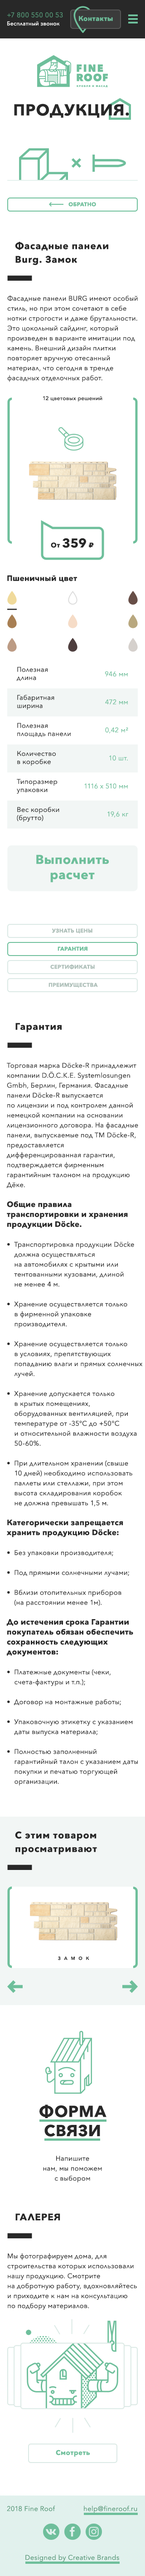
<style>
.page{position:relative;width:145px;height:2576px;background:#ffffff}
.page>*{position:absolute;margin:0}
.t1{font:6.8px "AvenirNext-Regular";letter-spacing:0.025em;color:#559777}
.t2{font:6.8px "AvenirNext-Bold";letter-spacing:0.025em;color:#6ebf9b}
.t3{font:5.4px "AvenirNext-Medium";letter-spacing:0.025em;color:#ffffff}
.t4{font:15.8px "AvenirNext-Bold";letter-spacing:0.05em;color:#282828;text-transform:uppercase}
.t5{font:5.4px "AvenirNext-Bold";letter-spacing:0.025em;color:#6ebf9b;text-transform:uppercase}
.t6{font:9.5px/13.6px "AvenirNext-Bold";letter-spacing:0.05em;color:#272727}
.t7{font:6.8px/9.9px "AvenirNext-Regular";letter-spacing:0.025em;color:#272727}
.t8{font:5.4px "AvenirNext-Medium";letter-spacing:0.025em;color:#272727}
.t9{font:12.7px "AvenirNext-Bold";letter-spacing:0.025em;color:#272727}
.t10{font:6.8px "AvenirNext-Bold";letter-spacing:0.025em;color:#272727}
.t11{font:6.8px "Geometria-ExtraBold";letter-spacing:0.025em;color:#272727}
.t12{font:7.7px "AvenirNext-Bold";letter-spacing:0.025em;color:#282828}
.t13{font:6.8px "AvenirNext-Regular";letter-spacing:0.025em;color:#272727}
.t14{font:6.8px "AvenirNext-Regular";letter-spacing:0.025em;color:#6ebf9b}
.t15{font:12.7px "AvenirNext-Bold";letter-spacing:0.025em;color:#6ebf9b}
.t16{font:5.4px "AvenirNext-Bold";letter-spacing:0.025em;color:#aebfb9;text-transform:uppercase}
.t17{font:9.5px "AvenirNext-Bold";letter-spacing:0.05em;color:#272727}
.t18{font:6.8px/9.9px "AvenirNext-Regular";letter-spacing:0.025em;color:#282828}
.t19{font:7.7px/9.9px "AvenirNext-Bold";letter-spacing:0.025em;color:#282828}
.t20{font:4.5px "AvenirNext-DemiBold";letter-spacing:0.765em;color:#272727}
.t21{font:15.8px/19.2px "AvenirNext-Bold";letter-spacing:0.05em;color:#282828;text-transform:uppercase}
.t22{font:9.5px "AvenirNext-Bold";letter-spacing:0.05em;color:#272727;text-transform:uppercase}
</style>
<div class="page">
<p class="t1" style="left:7px;top:12px;width:56px;height:6px">+7 800 550 00 53</p>
<p class="t2" style="left:79px;top:16px;width:34px;height:5px">Контакты</p>
<p class="t3" style="left:7px;top:21px;width:53px;height:5px">Бесплатный звонок</p>
<p class="t4" style="left:14px;top:104px;width:115px;height:14px">продукция.</p>
<p class="t5" style="left:68px;top:202px;width:28px;height:5px">обратно</p>
<p class="t6" style="left:15px;top:242px;width:93px;height:23px">Фасадные панели <br>Burg. Замок</p>
<p class="t7" style="left:7px;top:295px;width:130px;height:87px">Фасадные панели BURG имеют особый <br>стиль, но при этом сочетают в себе <br>нотки строгости и даже брутальности. <br>Это цокольный сайдинг, который <br>произведен в варианте имитации под <br>камень. Внешний дизайн плитки <br>повторяет вручную отесанный <br>материал, что сегодня в тренде <br>фасадных отделочных работ.</p>
<p class="t8" style="left:42px;top:396px;width:60px;height:6px">12 цветовых решений</p>
<p class="t9" style="left:51px;top:538px;width:43px;height:10px"><span class="t10">От </span>359 <span class="t11">₽</span></p>
<p class="t12" style="left:7px;top:575px;width:70px;height:7px">Пшеничный цвет</p>
<p class="t13" style="left:17px;top:667px;width:30px;height:14px">Полезная <br>длина</p>
<p class="t14" style="left:105px;top:671px;width:22px;height:6px">946 мм</p>
<p class="t13" style="left:17px;top:695px;width:37px;height:15px">Габаритная <br>ширина</p>
<p class="t14" style="left:105px;top:699px;width:22px;height:6px">472 мм</p>
<p class="t13" style="left:17px;top:723px;width:54px;height:14px">Полезная <br>площадь панели</p>
<p class="t14" style="left:105px;top:727px;width:23px;height:7px">0,42 м²</p>
<p class="t13" style="left:17px;top:751px;width:39px;height:15px">Количество <br>в коробке</p>
<p class="t14" style="left:109px;top:755px;width:18px;height:6px">10 шт.</p>
<p class="t13" style="left:17px;top:779px;width:40px;height:15px">Типоразмер <br>упаковки</p>
<p class="t14" style="left:84px;top:783px;width:43px;height:6px">1116 x 510 мм</p>
<p class="t13" style="left:17px;top:807px;width:42px;height:15px">Вес коробки <br>(брутто)</p>
<p class="t14" style="left:107px;top:811px;width:21px;height:7px">19,6 кг</p>
<p class="t15" style="left:36px;top:855px;width:73px;height:27px;text-align:center">Выполнить<br>расчет</p>
<p class="t16" style="left:52px;top:928px;width:40px;height:5px">Узнать цены</p>
<p class="t5" style="left:57px;top:947px;width:30px;height:4px">гарантия</p>
<p class="t16" style="left:50px;top:964px;width:44px;height:6px">сертификаты</p>
<p class="t16" style="left:48px;top:983px;width:50px;height:5px">преимущества</p>
<p class="t17" style="left:15px;top:1023px;width:46px;height:9px">Гарантия</p>
<p class="t18" style="left:6px;top:1062px;width:136px;height:723px">Торговая марка Döcke-R принадлежит <br>компании D.Ö.C.K.E. Systemlosungen <br>Gmbh, Берлин, Германия. Фасадные <br>панели Döcke-R выпускается <br>по лицензии и под контролем данной <br>немецкой компании на основании <br>лицензионного договора. На фасадные <br>панели, выпускаемые под ТМ Döcke-R, <br>предоставляется <br>дифференцированная гарантия, <br>подтверждается фирменным <br>гарантийным талоном на продукцию <br>Дёке.<br><br><span class="t19">Общие правила <br>транспортировки и хранения <br>продукции Döcke.<br><br></span>•  Транспортировка продукции Döcke <br>    должна осуществляться <br>    на автомобилях с крытыми или <br>    тентованными кузовами, длиной <br>    не менее 4 м.<br><br>•  Хранение осуществляется только <br>    в фирменной упаковке <br>    производителя.<br><br>•  Хранение осуществляется только <br>    в условиях, препятствующих <br>    попаданию влаги и прямых солнечных <br>    лучей.<br><br>•  Хранение допускается только <br>    в крытых помещениях, <br>    оборудованных вентиляцией, при <br>    температуре от -35°С до +50°С <br>    и относительной влажности воздуха <br>    50-60%.<br><br>•  При длительном хранении (свыше <br>    10 дней) необходимо использовать <br>    паллеты или стеллажи, при этом <br>    высота складирования коробок <br>    не должна превышать 1,5 м. <br><br><span class="t19">Категорически запрещается <br>хранить продукцию Döcke:<br><br></span>•  Без упаковки производителя;<br><br>•  Под прямыми солнечными лучами;<br><br>•  Вблизи отопительных приборов <br>    (на расстоянии менее 1м).<br><br><span class="t19">До истечения срока Гарантии <br>покупатель обязан обеспечить <br>сохранность следующих <br>документов: <br><br></span>•  Платежные документы (чеки, <br>    счета-фактуры и т.п.);<br><br>•  Договор на монтажные работы;<br><br>•  Упаковочную этикетку с указанием <br>    даты выпуска материала;<br><br>•  Полностью заполненный <br>    гарантийный талон с указанием даты <br>    покупки и печатью торгующей <br>    организации.</p>
<p class="t6" style="left:15px;top:1831px;width:82px;height:24px">С этим товаром <br>просматривают</p>
<p class="t20" style="left:58px;top:1956px;width:31px;height:4px">ЗАМОК</p>
<p class="t21" style="left:39px;top:2105px;width:67px;height:32px;text-align:center">ФОРМА<br>СВЯЗИ</p>
<p class="t18" style="left:43px;top:2156px;width:59px;height:26px;text-align:center">Напишите<br>нам, мы поможем<br>с выбором</p>
<p class="t22" style="left:15px;top:2213px;width:45px;height:8px">ГАЛЕРЕЯ</p>
<p class="t7" style="left:7px;top:2253px;width:130px;height:57px">Мы фотографируем дома, для <br>строительства которых использовали <br>нашу продукцию. Смотрите <br>на добротную работу, вдохновляйтесь <br>и приходите к нам на консультацию <br>по подбору материалов.</p>
<p class="t2" style="left:56px;top:2450px;width:34px;height:7px">Смотреть</p>
<p class="t1" style="left:7px;top:2505px;width:48px;height:6px">2018 Fine Roof</p>
<p class="t1" style="left:84px;top:2505px;width:53px;height:8px">help@fineroof.ru</p>
<p class="t1" style="left:25px;top:2554px;width:94px;height:8px">Designed by Creative Brands</p>
</div>
